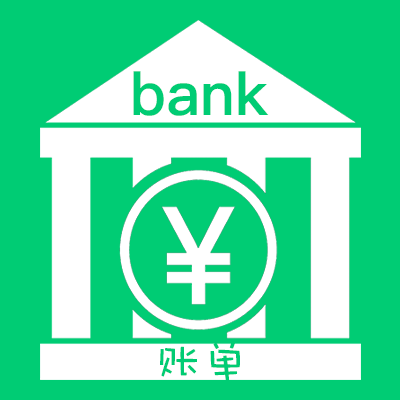
<style>
.page{position:relative;width:400px;height:400px;background:#00cc74}
.page>*{position:absolute;margin:0}
.t1{font:60px "PingFangSC-Semibold";color:#00cc74}
.t2{font:48px "DFWaWaSC-W5";color:#00cc74}
</style>
<div class="page">
<p class="t1" style="left:133px;top:71px;width:136px;height:45px">bank</p>
<p class="t2" style="left:160px;top:341px;width:80px;height:40px">账单</p>
</div>
